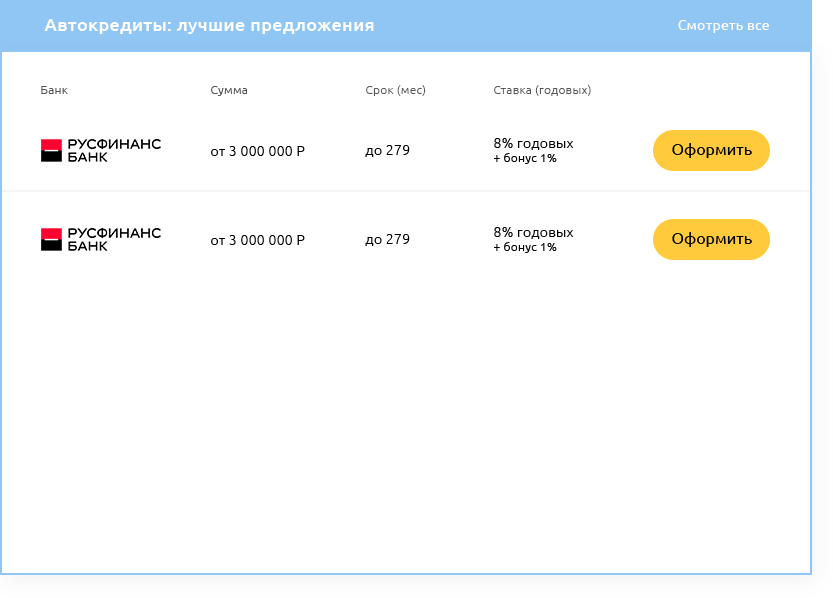
<style>
.page{position:relative;width:833px;height:598px;background:#ffffff}
.page>*{position:absolute;margin:0}
.t1{font:18px "Ubuntu-Medium";letter-spacing:0.02em;color:#ffffff}
.t2{font:14px "Ubuntu-Regular";letter-spacing:0.02em;color:#ffffff}
.t3{font:12px "Ubuntu-Light";letter-spacing:0.02em;color:#555555}
.t4{font:14px "Ubuntu-Light";letter-spacing:0.02em;color:#000000}
.t5{font:12px "Ubuntu-Light";letter-spacing:0.02em;color:#000000}
.t6{font:16px "Ubuntu";color:#000000}
</style>
<div class="page">
<p class="t1" style="left:44px;top:19px;width:330px;height:15px">Автокредиты: лучшие предложения</p>
<p class="t2" style="left:678px;top:20px;width:91px;height:13px">Смотреть все</p>
<p class="t3" style="left:41px;top:86px;width:27px;height:8px">Банк</p>
<p class="t3" style="left:211px;top:86px;width:36px;height:10px">Сумма</p>
<p class="t3" style="left:366px;top:85px;width:60px;height:11px">Срок (мес)</p>
<p class="t3" style="left:494px;top:85px;width:97px;height:11px">Ставка (годовых)</p>
<p class="t4" style="left:211px;top:146px;width:94px;height:10px">от 3 000 000 Р</p>
<p class="t4" style="left:365px;top:145px;width:45px;height:12px">до 279</p>
<p class="t4" style="left:494px;top:138px;width:80px;height:26px">8% годовых <br><span class="t5">+ бонус 1%</span></p>
<p class="t6" style="left:672px;top:143px;width:80px;height:15px">Оформить</p>
<p class="t4" style="left:494px;top:227px;width:80px;height:26px">8% годовых <br><span class="t5">+ бонус 1%</span></p>
<p class="t6" style="left:672px;top:232px;width:80px;height:15px">Оформить</p>
<p class="t4" style="left:211px;top:235px;width:94px;height:10px">от 3 000 000 Р</p>
<p class="t4" style="left:365px;top:234px;width:45px;height:12px">до 279</p>
</div>
